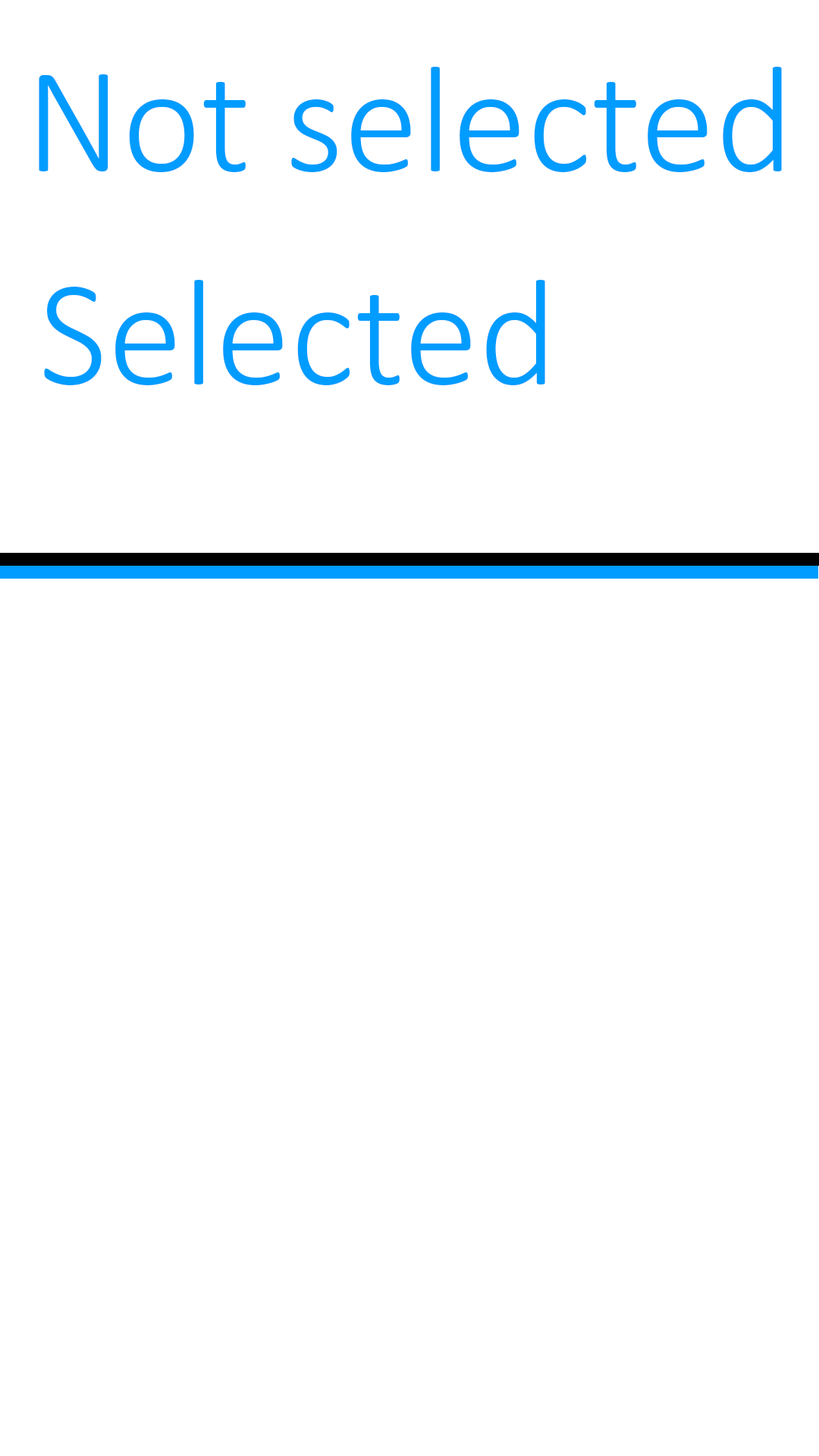
<style>
.page{position:relative;width:819px;height:1456px;background:#ffffff}
.page>*{position:absolute;margin:0}
.t1{font:151.7px "Calibri-Light";color:#009cff}
</style>
<div class="page">
<p class="t1" style="left:39px;top:67px;width:743px;height:105px">Not selected</p>
<p class="t1" style="left:44px;top:280px;width:501px;height:105px">Selected</p>
</div>
